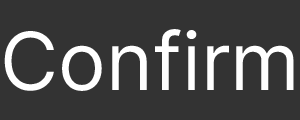
<style>
.page{position:relative;width:300px;height:120px;background:#333333}
.page>*{position:absolute;margin:0}
.t1{font:80px "Inter-Regular";color:#ffffff}
</style>
<div class="page">
<p class="t1" style="left:4px;top:29px;width:290px;height:62px">Confirm</p>
</div>
